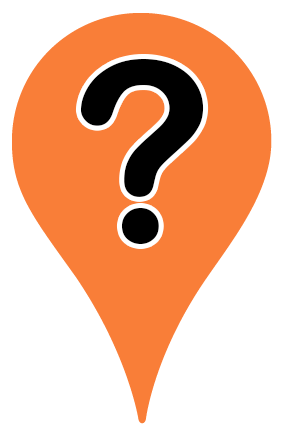
<style>
.page{position:relative;width:287px;height:440px;background:#ffffff}
.page>*{position:absolute;margin:0}
.t1{font:250px "ArialRoundedMTBold";letter-spacing:-0.007em;color:#000000}
</style>
<div class="page">
<p class="t1" style="left:80px;top:59px;width:124px;height:185px">?</p>
</div>
